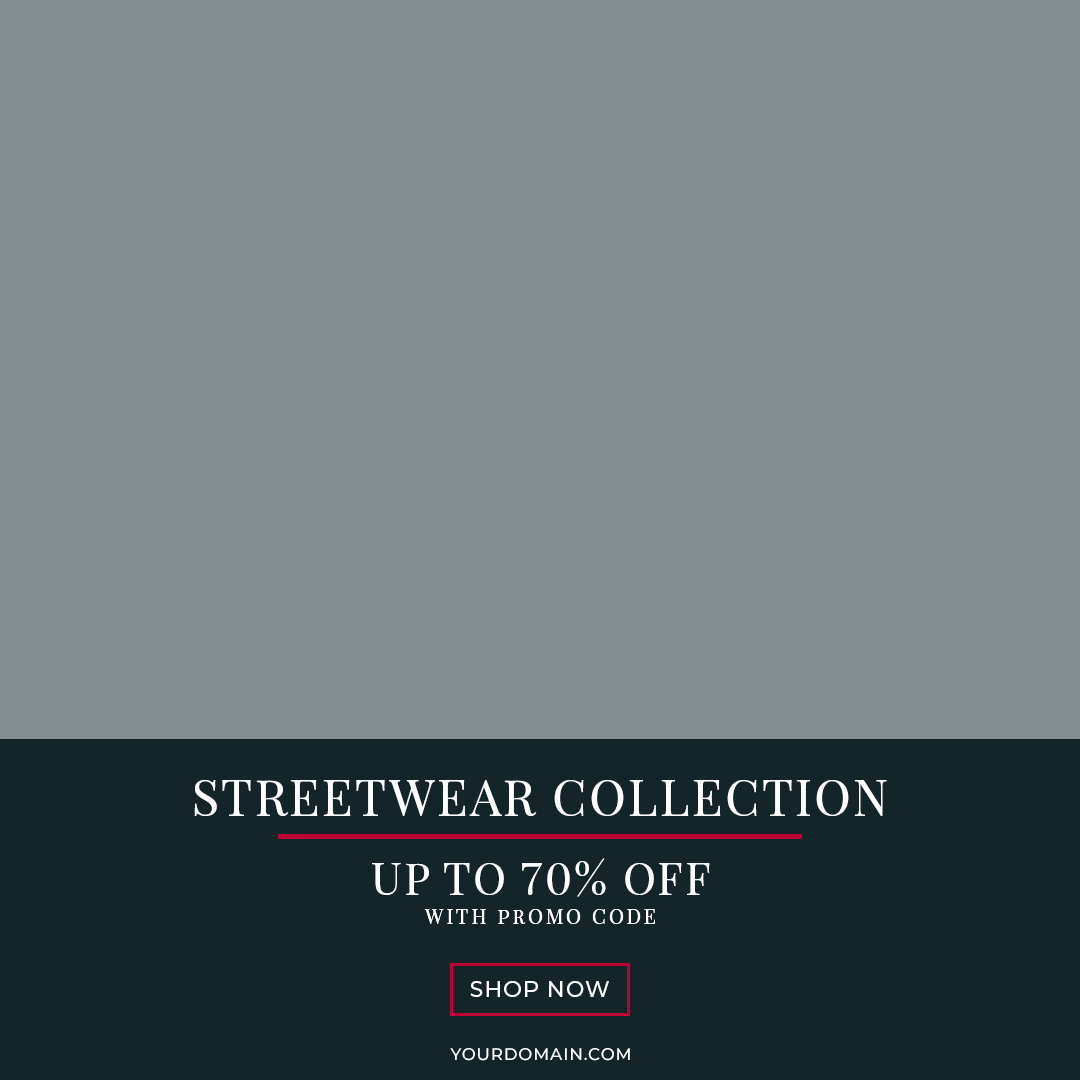
<style>
.page{position:relative;width:1080px;height:1080px;background:#838c91}
.page>*{position:absolute;margin:0}
.t1{font:50px "PlayfairDisplay-Regular";letter-spacing:0.05em;color:#ffffff;text-transform:uppercase}
.t2{font:44.5px "PlayfairDisplay-Regular";letter-spacing:0.05em;color:#ffffff;text-transform:uppercase}
.t3{font:20px "PlayfairDisplay-Regular";letter-spacing:0.15em;color:#ffffff;text-transform:uppercase}
.t4{font:22px "Montserrat-Medium";letter-spacing:0.05em;color:#ffffff;text-transform:uppercase}
.t5{font:16.8px "Montserrat-Medium";letter-spacing:0.05em;color:#ffffff;text-transform:uppercase}
</style>
<div class="page">
<p class="t1" style="left:194px;top:779px;width:693px;height:37px">streetwear Collection</p>
<p class="t2" style="left:372px;top:858px;width:338px;height:39px">Up To 70% Off</p>
<p class="t3" style="left:424px;top:909px;width:231px;height:15px">With Promo Code</p>
<p class="t4" style="left:470px;top:981px;width:139px;height:16px">Shop Now</p>
<p class="t5" style="left:450px;top:1048px;width:180px;height:13px">Yourdomain.com</p>
</div>
